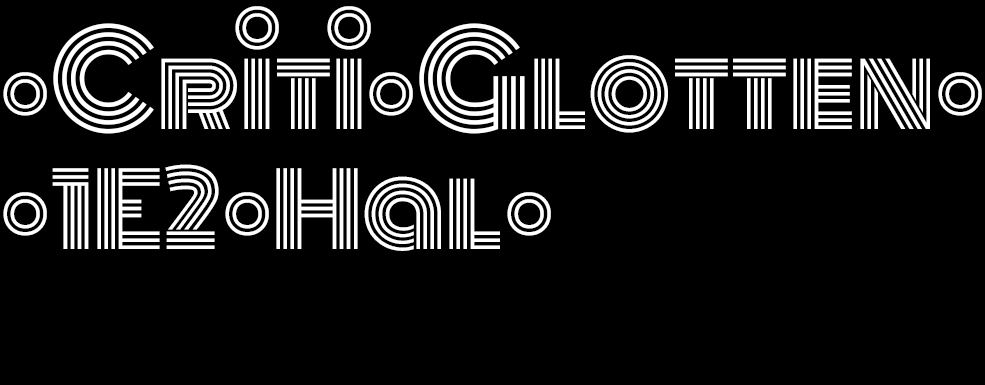
<style>
.page{position:relative;width:985px;height:385px;background:#000000}
.page>*{position:absolute;margin:0}
.t1{font:100px "Monoton-Regular";color:#ffffff}
.t2{font:125px "Monoton-Regular";color:#ffffff}
</style>
<div class="page">
<p class="t1" style="left:235px;top:6px;width:44px;height:44px">•</p>
<p class="t1" style="left:327px;top:6px;width:44px;height:44px">•</p>
<p class="t1" style="left:3px;top:23px;width:979px;height:228px">•<span class="t2">C</span>riti•<span class="t2">G</span>lotten•<br>•1E2•Hal•</p>
</div>
